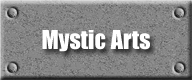
<style>
.page{position:relative;width:192px;height:80px}
.page>*{position:absolute;margin:0}
.t1{font:24px "Impact";color:#ffffff}
</style>
<div class="page">
<p class="t1" style="left:42px;top:30px;width:108px;height:22px">Mystic Arts</p>
</div>
